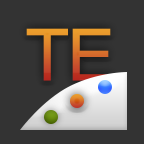
<style>
.page{position:relative;width:144px;height:144px;background:#333333}
.page>*{position:absolute;margin:0}
.t1{font:72px "ArialMT";letter-spacing:-0.03em}
</style>
<div class="page">
<p class="t1" style="left:26px;top:28px;width:86px;height:53px">TE</p>
</div>
